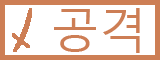
<style>
.page{position:relative;width:160px;height:60px;background:#ffffff}
.page>*{position:absolute;margin:0}
.t1{font:48px "MalgunGothicRegular";color:#cd7e55}
</style>
<div class="page">
<p class="t1" style="left:54px;top:8px;width:86px;height:45px">공격</p>
</div>
